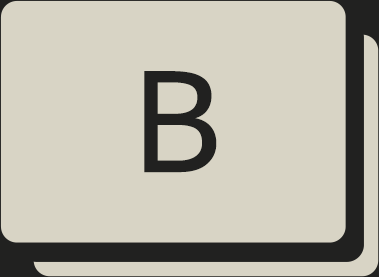
<style>
.page{position:relative;width:379px;height:277px;background:#d8d4c5}
.page>*{position:absolute;margin:0}
.t1{font:141.8px "Muli";letter-spacing:0.05em;color:#212120}
</style>
<div class="page">
<p class="t1" style="left:144px;top:71px;width:73px;height:102px">B</p>
</div>
